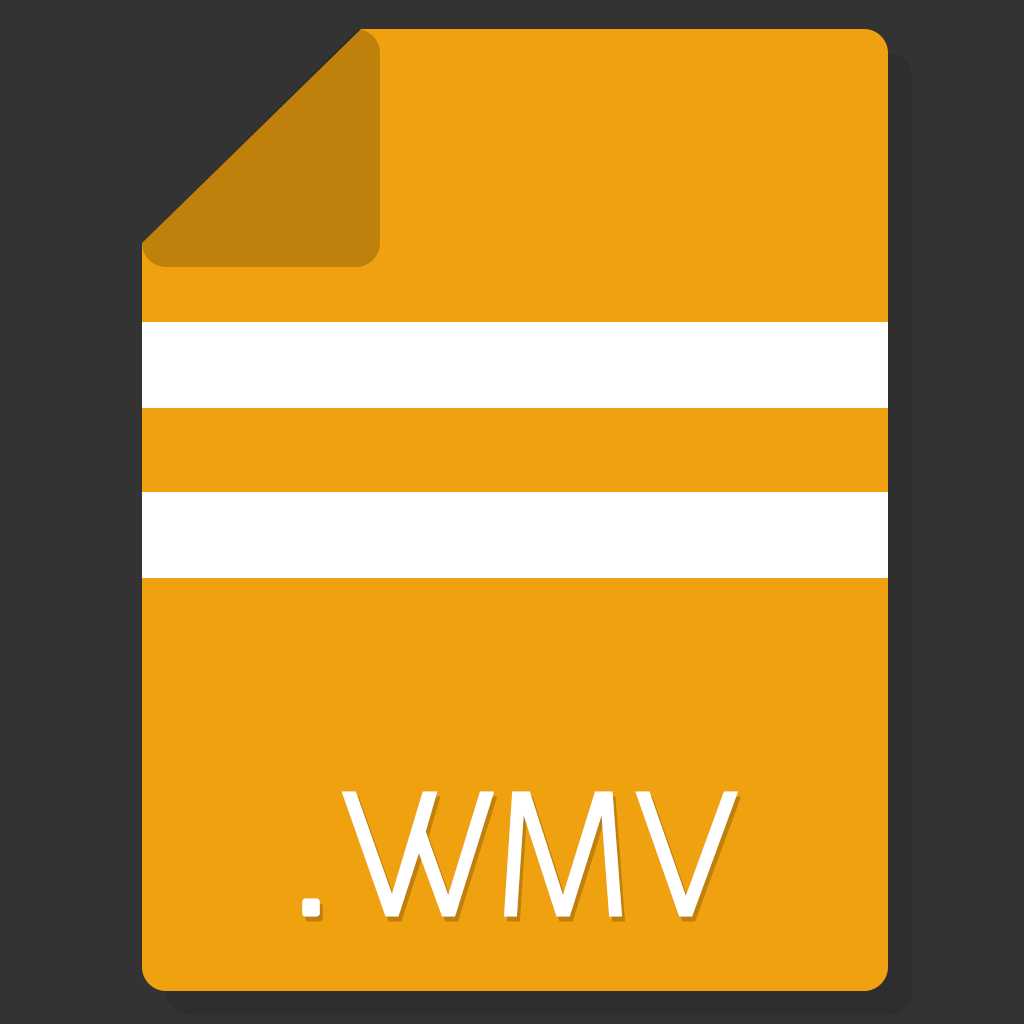
<style>
.page{position:relative;width:1024px;height:1024px;background:#efa10f}
.page>*{position:absolute;margin:0}
.t1{font:170.3px "Exo-Regular";color:#ffffff}
</style>
<div class="page">
<p class="t1" style="left:302px;top:791px;width:436px;height:126px">.WMV</p>
</div>
